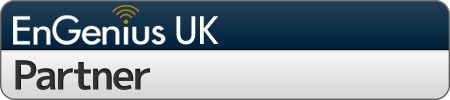
<style>
.page{position:relative;width:450px;height:100px}
.page>*{position:absolute;margin:0}
.t1{font:38px "mplus-2p-medium";color:#ffffff;scale:0.9 1}
.t2{font:40px "mplus-2p-bold";letter-spacing:-0.04em;color:#333333}
</style>
<div class="page">
<p class="t1" style="left:176px;top:16px;width:43px;height:29px">UK</p>
<p class="t2" style="left:15px;top:60px;width:135px;height:30px">Partner</p>
</div>
